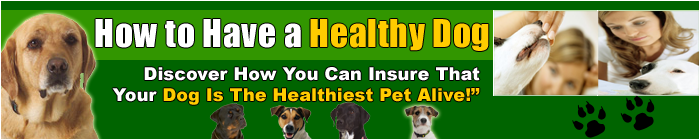
<style>
.page{position:relative;width:700px;height:140px;background:#006400}
.page>*{position:absolute;margin:0}
.t1{font:35.6px "Impact";letter-spacing:0.02em;color:#ffffff}
.t2{font:35.6px "Impact";letter-spacing:0.02em;color:#ffcc00}
.t3{font:17.8px "Arial-Black";color:#ffffff}
.t4{font:17.8px "Arial-Black";color:#ffcc00}
</style>
<div class="page">
<p class="t1" style="left:95px;top:19px;width:394px;height:32px">How to Have a <span class="t2">Healthy Dog</span></p>
<p class="t3" style="left:112px;top:67px;width:368px;height:38px;text-align:right">Discover How You Can Insure That<br>Your <span class="t4">Dog Is The Healthiest Pet Alive!”</span></p>
</div>
